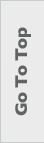
<style>
.page{position:relative;width:44px;height:143px;background:#ebebeb}
.page>*{position:absolute;margin:0}
.t1{font:17.3px "GillSans-Bold";letter-spacing:-0.05em;color:#616363}
</style>
<div class="page">
<p class="t1" style="left:15px;top:27px;width:16px;height:89px;rotate:-90deg">Go To Top</p>
</div>
